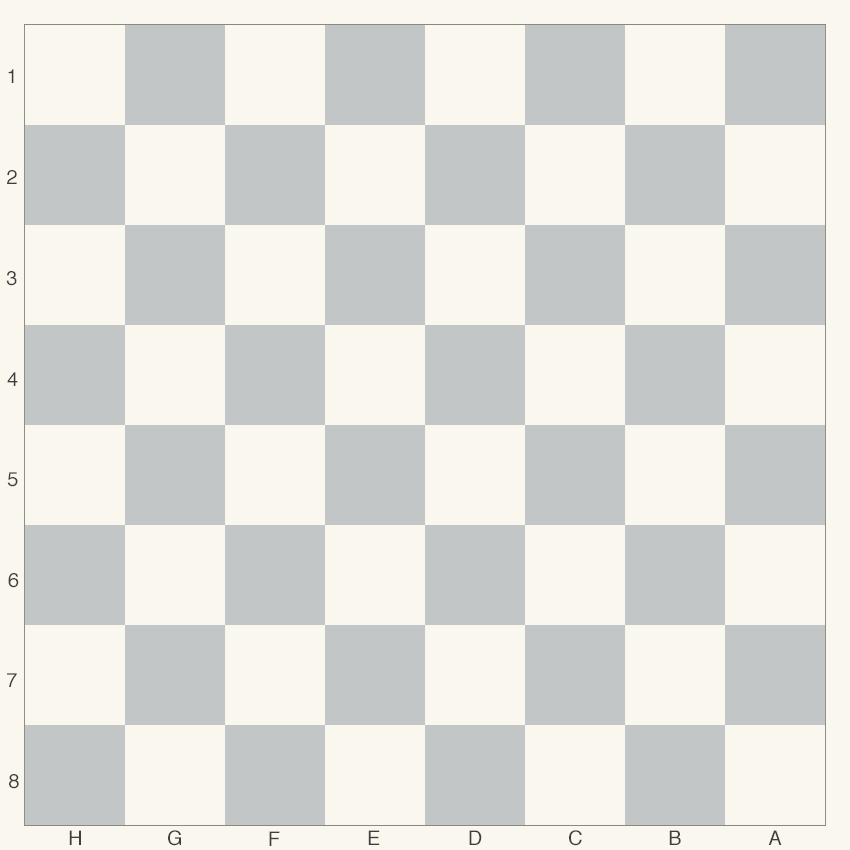
<style>
.page{position:relative;width:850px;height:850px;background:#faf7ef}
.page>*{position:absolute;margin:0}
.t1{font:20px "Helvetica";letter-spacing:0.02em;color:#3f3e3c}
</style>
<div class="page">
<p class="t1" style="left:8px;top:69px;width:6px;height:14px">1</p>
<p class="t1" style="left:7px;top:170px;width:10px;height:14px">2</p>
<p class="t1" style="left:6px;top:271px;width:11px;height:15px">3</p>
<p class="t1" style="left:7px;top:372px;width:11px;height:14px">4</p>
<p class="t1" style="left:7px;top:472px;width:11px;height:15px">5</p>
<p class="t1" style="left:8px;top:573px;width:11px;height:15px">6</p>
<p class="t1" style="left:7px;top:673px;width:10px;height:14px">7</p>
<p class="t1" style="left:9px;top:774px;width:10px;height:15px">8</p>
<p class="t1" style="left:69px;top:830px;width:12px;height:15px">H</p>
<p class="t1" style="left:168px;top:830px;width:13px;height:16px">G</p>
<p class="t1" style="left:269px;top:831px;width:11px;height:15px">F</p>
<p class="t1" style="left:368px;top:830px;width:12px;height:15px">E</p>
<p class="t1" style="left:469px;top:830px;width:13px;height:15px">D</p>
<p class="t1" style="left:569px;top:830px;width:13px;height:16px">C</p>
<p class="t1" style="left:669px;top:830px;width:12px;height:15px">B</p>
<p class="t1" style="left:768px;top:830px;width:14px;height:15px">A</p>
</div>
